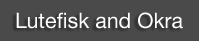
<style>
.page{position:relative;width:199px;height:41px;background:#4a4a4a}
.page>*{position:absolute;margin:0}
.t1{font:21.4px "HelveticaNeue";color:#fefefe}
</style>
<div class="page">
<p class="t1" style="left:16px;top:12px;width:167px;height:17px">Lutefisk and Okra</p>
</div>
